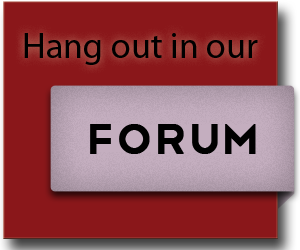
<style>
.page{position:relative;width:300px;height:250px;background:#8a171a}
.page>*{position:absolute;margin:0}
.t1{font:36px "MyriadPro-Regular";color:#000000}
.t2{font:54px "Telegrafico";color:#000000;font-weight:bold}
</style>
<div class="page">
<p class="t1" style="left:24px;top:33px;width:234px;height:32px">Hang out in our</p>
<p class="t2" style="left:90px;top:124px;width:166px;height:30px">FORUM</p>
</div>
